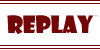
<style>
.page{position:relative;width:100px;height:50px;background:#ffffff}
.page>*{position:absolute;margin:0}
.t1{font:22.9px "ShowcardGothic-Reg";color:#730606}
</style>
<div class="page">
<p class="t1" style="left:7px;top:15px;width:86px;height:19px">replay</p>
</div>
